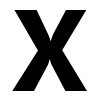
<style>
.page{position:relative;width:100px;height:100px;background:#ffffff}
.page>*{position:absolute;margin:0}
.t1{font:115px "SegoeUI-Bold";letter-spacing:-0.04em;color:#000000}
</style>
<div class="page">
<p class="t1" style="left:12px;top:10px;width:75px;height:81px">X</p>
</div>
